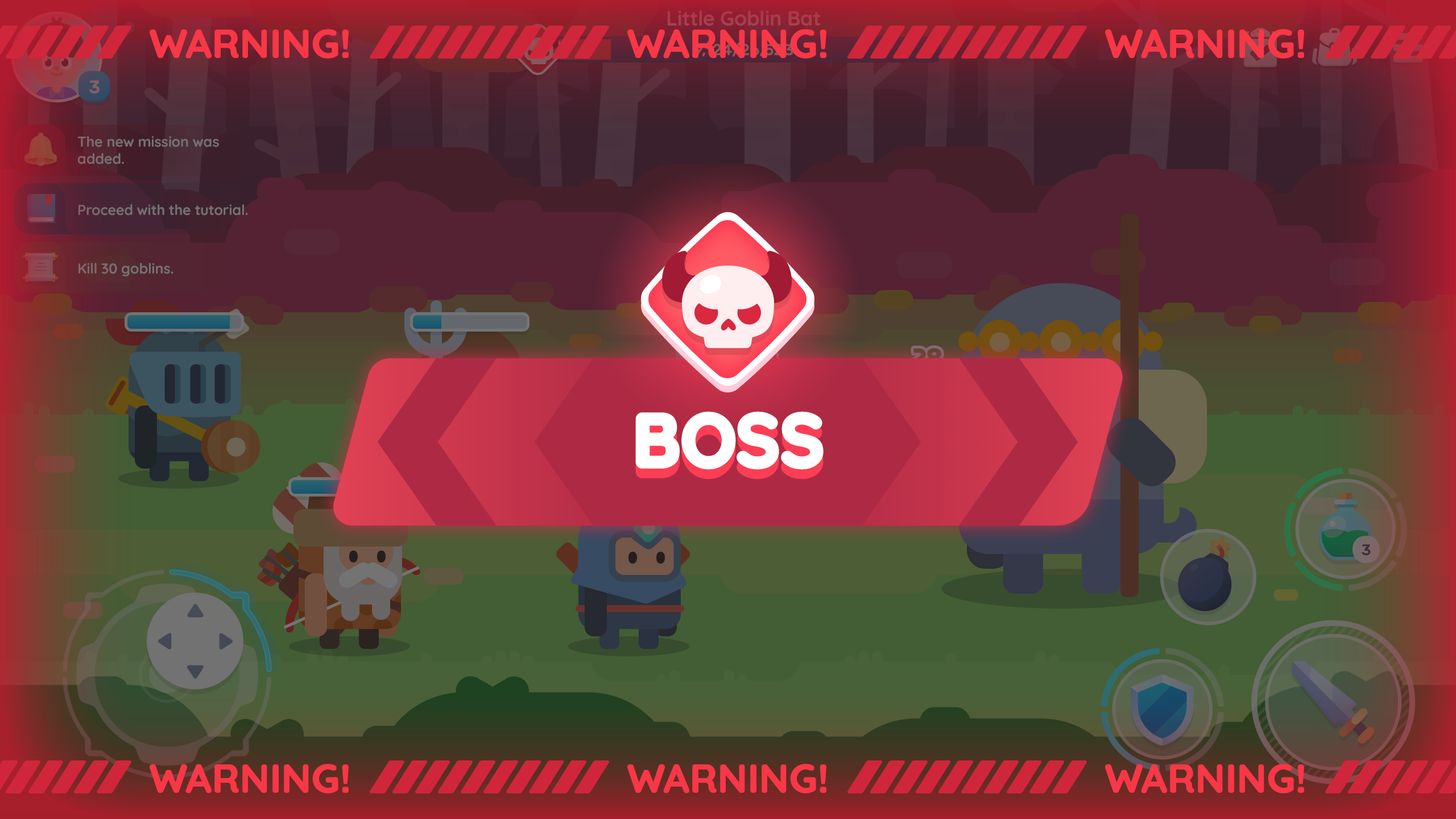
<style>
.page{position:relative;width:1456px;height:819px}
.page>*{position:absolute;margin:0}
.t1{font:39.8px "Quicksand-Bold";color:#f83747;text-transform:uppercase;font-weight:bold}
.t2{font:73.9px "Quicksand-Bold";color:#ffffff;text-transform:uppercase;font-weight:bold}
.t3{font:73.9px "Quicksand-Bold";text-transform:uppercase;font-weight:bold}
</style>
<div class="page">
<p class="t1" style="left:150px;top:29px;width:199px;height:30px">Warning!</p>
<p class="t1" style="left:627px;top:29px;width:199px;height:30px">Warning!</p>
<p class="t1" style="left:1105px;top:29px;width:199px;height:30px">Warning!</p>
<p class="t2" style="left:635px;top:411px;width:189px;height:59px">BOSS</p>
<p class="t3" style="left:635px;top:421px;width:189px;height:58px">BOSS</p>
<p class="t1" style="left:150px;top:764px;width:199px;height:29px">Warning!</p>
<p class="t1" style="left:627px;top:764px;width:199px;height:29px">Warning!</p>
<p class="t1" style="left:1105px;top:764px;width:199px;height:29px">Warning!</p>
</div>
